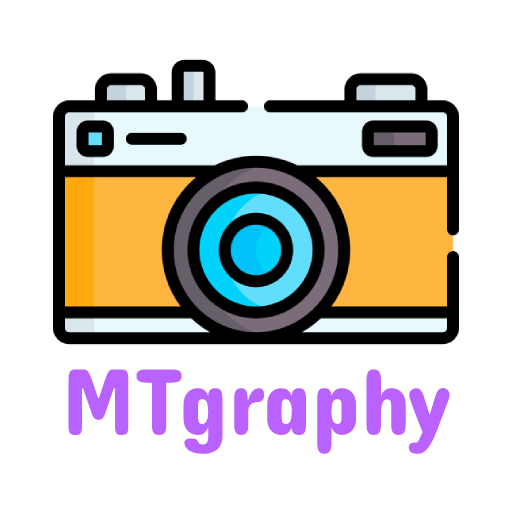
<style>
.page{position:relative;width:512px;height:512px;background:#ffffff}
.page>*{position:absolute;margin:0}
.t1{font:96px "Dangrek-Regular";color:#ba62ff}
</style>
<div class="page">
<p class="t1" style="left:68px;top:369px;width:382px;height:85px">MTgraphy</p>
</div>
